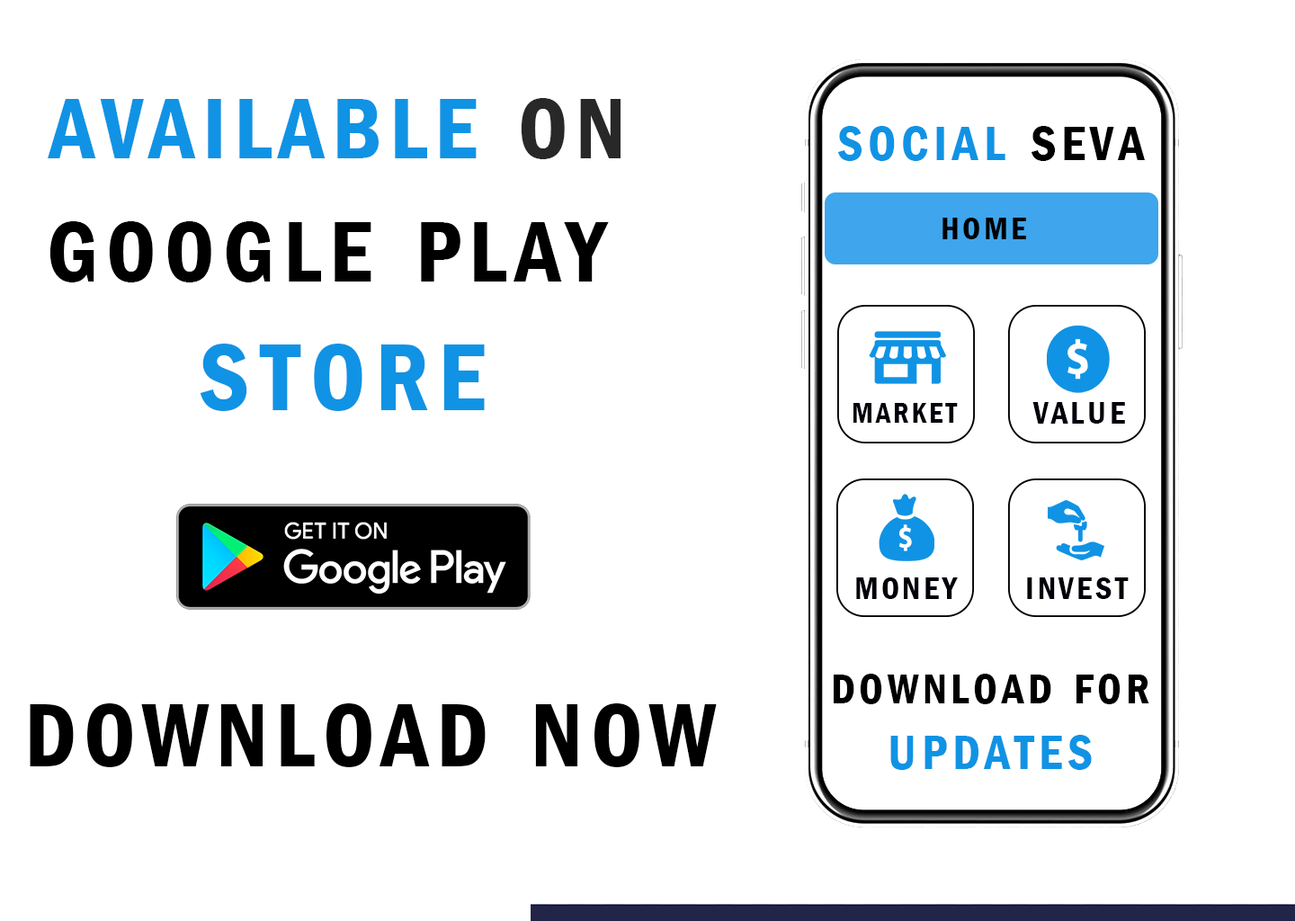
<style>
.page{position:relative;width:1295px;height:921px;background:#ffffff}
.page>*{position:absolute;margin:0}
.t1{font:127.7px "FranklinGothic-DemiCond";letter-spacing:0.08em;color:#1093e4;font-variant:small-caps}
.t2{font:127.7px "FranklinGothic-DemiCond";letter-spacing:0.08em;color:#282828;font-variant:small-caps}
.t3{font:71.9px "FranklinGothic-DemiCond";letter-spacing:0.1em;color:#1093e4;font-variant:small-caps}
.t4{font:71.9px "FranklinGothic-DemiCond";letter-spacing:0.1em;color:#000000;font-variant:small-caps}
.t5{font:127.7px "FranklinGothic-DemiCond";letter-spacing:0.09em;color:#000000;font-variant:small-caps}
.t6{font:45.9px "FranklinGothic-DemiCond";letter-spacing:0.1em;color:#000000;font-variant:small-caps}
.t7{font:141.2px "FranklinGothic-DemiCond";letter-spacing:0.095em;color:#1093e4;font-variant:small-caps}
.t8{font:45.9px "FranklinGothic-DemiCond";letter-spacing:0.1em;color:#00000b;font-variant:small-caps}
.t9{font:40.5px "FranklinGothic-DemiCond";letter-spacing:0.1em;color:#00000b;font-variant:small-caps}
.t10{font:61.1px "FranklinGothic-DemiCond";letter-spacing:0.1em;color:#000000;font-variant:small-caps}
.t11{font:132.2px "FranklinGothic-DemiCond";letter-spacing:0.08em;color:#000000;font-variant:small-caps}
.t12{font:71px "FranklinGothic-DemiCond";letter-spacing:0.1em;color:#1093e4;font-variant:small-caps}
</style>
<div class="page">
<p class="t1" style="left:48px;top:98px;width:572px;height:61px">available <span class="t2">on</span></p>
<p class="t3" style="left:837px;top:126px;width:308px;height:35px">social <span class="t4">seva</span></p>
<p class="t5" style="left:49px;top:221px;width:560px;height:61px">google play</p>
<p class="t6" style="left:942px;top:218px;width:84px;height:21px">home</p>
<p class="t7" style="left:200px;top:344px;width:285px;height:67px">store</p>
<p class="t8" style="left:1032px;top:402px;width:93px;height:22px">value</p>
<p class="t9" style="left:853px;top:403px;width:105px;height:20px">market</p>
<p class="t8" style="left:856px;top:577px;width:102px;height:22px">money</p>
<p class="t8" style="left:1027px;top:577px;width:102px;height:22px">invest</p>
<p class="t10" style="left:834px;top:674px;width:315px;height:30px">download for</p>
<p class="t11" style="left:30px;top:703px;width:687px;height:64px">download now</p>
<p class="t12" style="left:890px;top:735px;width:202px;height:35px">updates</p>
</div>
